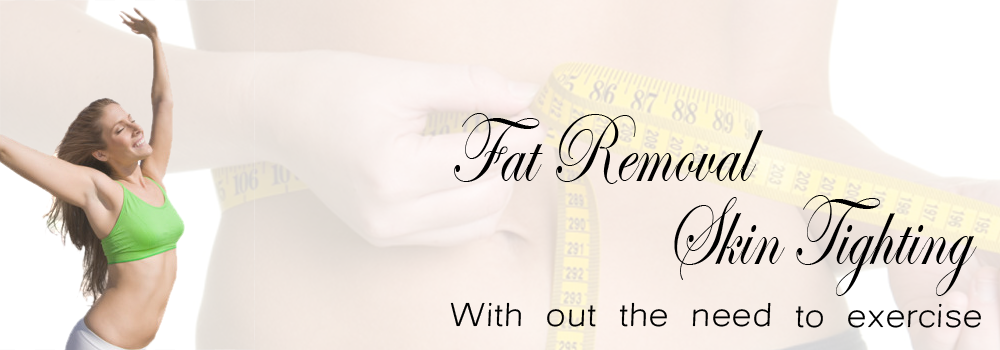
<style>
.page{position:relative;width:1000px;height:350px}
.page>*{position:absolute;margin:0}
.t1{font:100.9px "EdwardianScriptITC";color:#000000;scale:0.72 1}
.t2{font:43.2px "Microsoft-Yi-Baiti";color:#000000;scale:1.14 1}
</style>
<div class="page">
<p class="t1" style="left:454px;top:113px;width:309px;height:71px">Fat Removal</p>
<p class="t1" style="left:674px;top:195px;width:303px;height:101px">Skin Tighting</p>
<p class="t2" style="left:450px;top:302px;width:531px;height:26px">With out the need to exercise</p>
</div>
